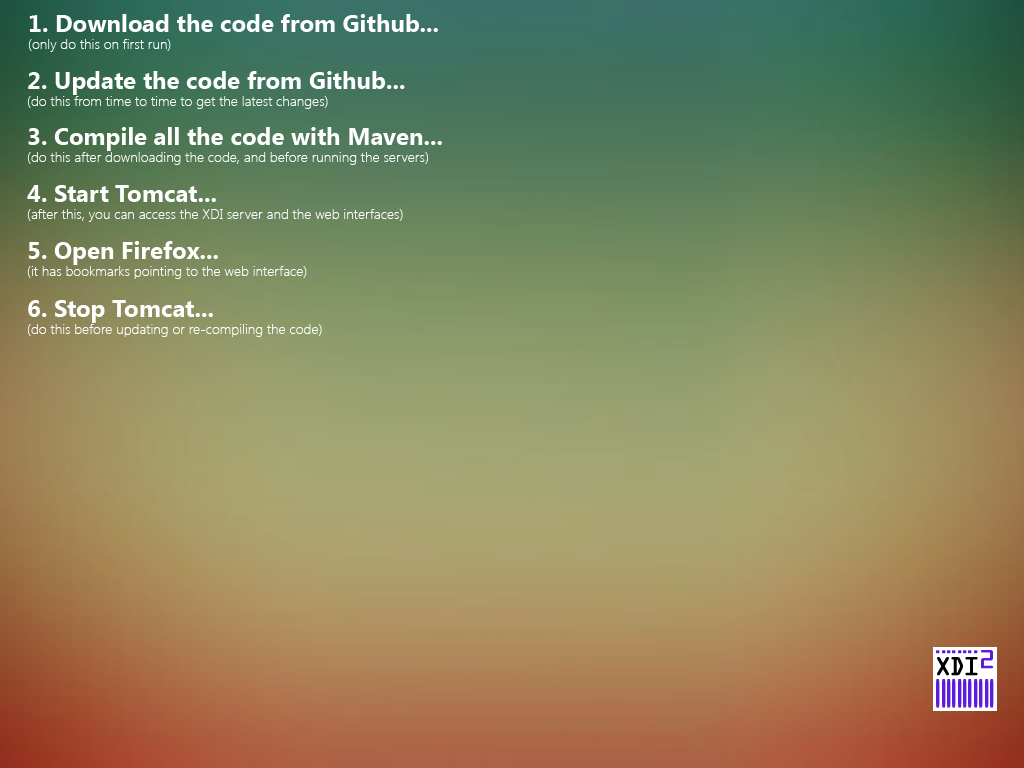
<style>
.page{position:relative;width:1024px;height:768px}
.page>*{position:absolute;margin:0}
.t1{font:24px "SegoeUI-Bold";color:#ffffff}
.t2{font:14px "SegoeUI-Light";color:#ffffff}
</style>
<div class="page">
<p class="t1" style="left:28px;top:14px;width:410px;height:38px">1. Download the code from Github...<br><span class="t2">(only do this on first run)</span></p>
<p class="t2" style="left:27px;top:71px;width:378px;height:38px"><span class="t1">2. Update the code from Github...<br></span>(do this from time to time to get the latest changes)</p>
<p class="t2" style="left:27px;top:127px;width:415px;height:38px"><span class="t1">3. Compile all the code with Maven...<br></span>(do this after downloading the code, and before running the servers)</p>
<p class="t2" style="left:27px;top:185px;width:376px;height:37px"><span class="t1">4. Start Tomcat...<br></span>(after this, you can access the XDI server and the web interfaces)</p>
<p class="t2" style="left:27px;top:241px;width:280px;height:38px"><span class="t1">5. Open Firefox...<br></span>(it has bookmarks pointing to the web interface)</p>
<p class="t2" style="left:27px;top:300px;width:295px;height:37px"><span class="t1">6. Stop Tomcat...<br></span>(do this before updating or re-compiling the code)</p>
</div>
